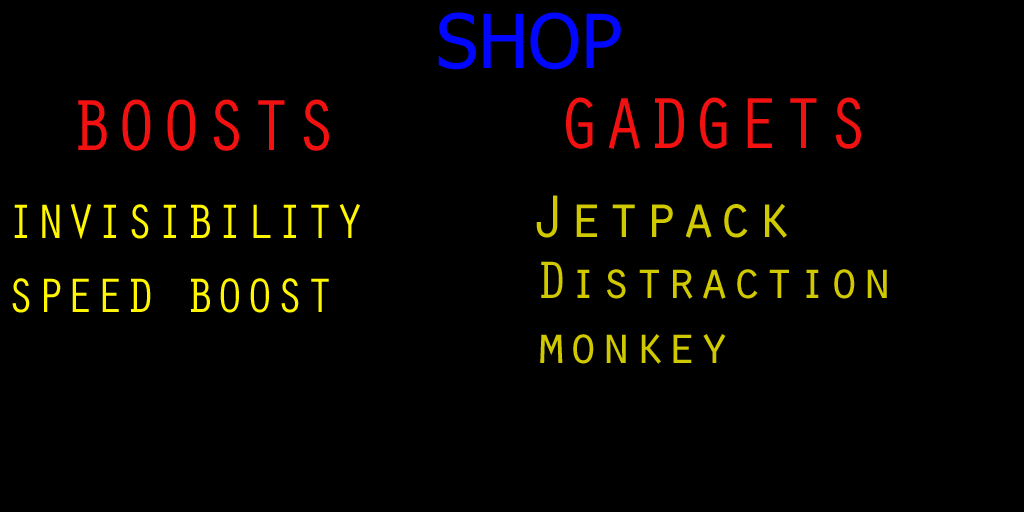
<style>
.page{position:relative;width:1024px;height:512px;background:#000000}
.page>*{position:absolute;margin:0}
.t1{font:74.7px "Tahoma";color:#0006ff}
.t2{font:74.7px "OratorStd";color:#f11111}
.t3{font:62.4px "OratorStd";color:#d0c900}
.t4{font:49.8px "OratorStd";color:#fff600}
.t5{font:54.4px "OratorStd";color:#d0c900}
</style>
<div class="page">
<p class="t1" style="left:438px;top:12px;width:183px;height:58px">SHOP</p>
<p class="t2" style="left:78px;top:99px;width:251px;height:52px">BOOSTS</p>
<p class="t2" style="left:566px;top:97px;width:295px;height:52px">GADGETS</p>
<p class="t3" style="left:536px;top:195px;width:251px;height:43px">Jetpack</p>
<p class="t4" style="left:14px;top:204px;width:346px;height:35px">INVISIBILITY</p>
<p class="t5" style="left:540px;top:261px;width:347px;height:103px">Distraction<br>monkey</p>
<p class="t4" style="left:12px;top:278px;width:317px;height:35px">SPEED BOOST</p>
</div>
